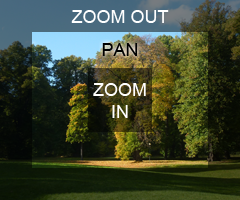
<style>
.page{position:relative;width:240px;height:200px}
.page>*{position:absolute;margin:0}
.t1{font:18px "ArialMT";color:#ffffff}
.t2{font:18px "ArialMT";color:#000000}
</style>
<div class="page">
<p class="t1" style="left:71px;top:10px;width:98px;height:13px">ZOOM OUT</p>
<p class="t2" style="left:102px;top:43px;width:36px;height:13px">PAN</p>
<p class="t1" style="left:93px;top:83px;width:53px;height:35px;text-align:center">ZOOM<br>IN</p>
</div>
